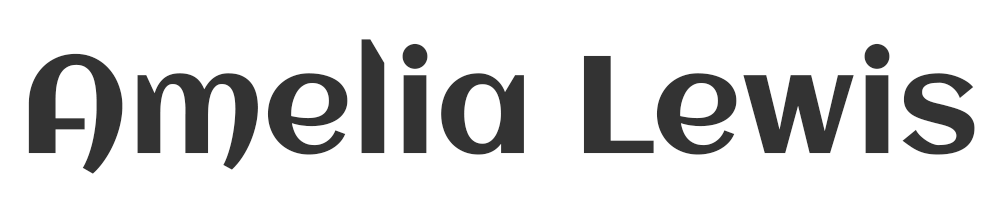
<style>
.page{position:relative;width:1000px;height:200px;background:#ffffff}
.page>*{position:absolute;margin:0}
.t1{font:138px "Aclonica-Regular";color:#333333}
</style>
<div class="page">
<p class="t1" style="left:28px;top:39px;width:947px;height:135px">Amelia Lewis</p>
</div>
